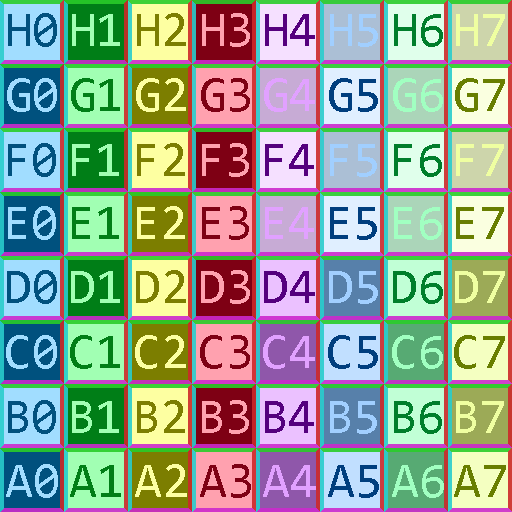
<style>
.page{position:relative;width:512px;height:512px}
.page>*{position:absolute;margin:0}
.t1{font:12px "Consolas";color:#00517e}
.t2{font:12px "Consolas";color:#a1ffb3}
.t3{font:12px "Consolas";color:#7c7e00}
.t4{font:12px "Consolas";color:#ffa1af}
.t5{font:12px "Consolas";color:#55007e}
.t6{font:12px "Consolas";color:#a1cfff}
.t7{font:12px "Consolas";color:#007e2b}
.t8{font:12px "Consolas";color:#efffa1}
.t9{font:12px "Consolas";color:#a1ddff}
.t10{font:12px "Consolas";color:#007e17}
.t11{font:12px "Consolas";color:#fdffa1}
.t12{font:12px "Consolas";color:#7e0014}
.t13{font:12px "Consolas";color:#e1a1ff}
.t14{font:12px "Consolas";color:#003e7e}
.t15{font:12px "Consolas";color:#a1ffc1}
.t16{font:12px "Consolas";color:#687e00}
</style>
<div class="page">
<p class="t1" style="left:8px;top:13px;width:49px;height:34px;text-align:center">H0</p>
<p class="t2" style="left:72px;top:14px;width:48px;height:32px;text-align:center">H1</p>
<p class="t3" style="left:137px;top:13px;width:49px;height:33px;text-align:center">H2</p>
<p class="t4" style="left:202px;top:13px;width:48px;height:34px;text-align:center">H3</p>
<p class="t5" style="left:265px;top:14px;width:50px;height:32px;text-align:center">H4</p>
<p class="t6" style="left:330px;top:14px;width:48px;height:33px;text-align:center">H5</p>
<p class="t7" style="left:394px;top:14px;width:49px;height:33px;text-align:center">H6</p>
<p class="t8" style="left:456px;top:14px;width:49px;height:32px;text-align:center">H7</p>
<p class="t9" style="left:7px;top:78px;width:50px;height:34px;text-align:center">G0</p>
<p class="t10" style="left:71px;top:78px;width:49px;height:34px;text-align:center">G1</p>
<p class="t11" style="left:136px;top:78px;width:50px;height:34px;text-align:center">G2</p>
<p class="t12" style="left:201px;top:78px;width:49px;height:34px;text-align:center">G3</p>
<p class="t13" style="left:264px;top:78px;width:51px;height:34px;text-align:center">G4</p>
<p class="t14" style="left:329px;top:78px;width:49px;height:34px;text-align:center">G5</p>
<p class="t15" style="left:393px;top:78px;width:50px;height:34px;text-align:center">G6</p>
<p class="t16" style="left:455px;top:78px;width:50px;height:34px;text-align:center">G7</p>
<p class="t1" style="left:8px;top:143px;width:48px;height:34px;text-align:center">F0</p>
<p class="t2" style="left:72px;top:144px;width:47px;height:32px;text-align:center">F1</p>
<p class="t3" style="left:137px;top:143px;width:48px;height:33px;text-align:center">F2</p>
<p class="t4" style="left:202px;top:143px;width:47px;height:34px;text-align:center">F3</p>
<p class="t5" style="left:265px;top:144px;width:49px;height:32px;text-align:center">F4</p>
<p class="t6" style="left:330px;top:144px;width:47px;height:33px;text-align:center">F5</p>
<p class="t7" style="left:394px;top:144px;width:48px;height:33px;text-align:center">F6</p>
<p class="t8" style="left:456px;top:144px;width:48px;height:32px;text-align:center">F7</p>
<p class="t9" style="left:8px;top:206px;width:48px;height:34px;text-align:center">E0</p>
<p class="t10" style="left:72px;top:207px;width:47px;height:32px;text-align:center">E1</p>
<p class="t11" style="left:137px;top:206px;width:48px;height:33px;text-align:center">E2</p>
<p class="t12" style="left:202px;top:206px;width:47px;height:34px;text-align:center">E3</p>
<p class="t13" style="left:265px;top:207px;width:49px;height:32px;text-align:center">E4</p>
<p class="t14" style="left:330px;top:207px;width:47px;height:33px;text-align:center">E5</p>
<p class="t15" style="left:394px;top:207px;width:48px;height:33px;text-align:center">E6</p>
<p class="t16" style="left:456px;top:207px;width:48px;height:32px;text-align:center">E7</p>
<p class="t1" style="left:7px;top:270px;width:50px;height:34px;text-align:center">D0</p>
<p class="t3" style="left:136px;top:270px;width:50px;height:33px;text-align:center">D2</p>
<p class="t4" style="left:201px;top:270px;width:49px;height:34px;text-align:center">D3</p>
<p class="t2" style="left:71px;top:271px;width:49px;height:32px;text-align:center">D1</p>
<p class="t5" style="left:264px;top:271px;width:51px;height:32px;text-align:center">D4</p>
<p class="t6" style="left:329px;top:271px;width:49px;height:33px;text-align:center">D5</p>
<p class="t7" style="left:393px;top:271px;width:50px;height:33px;text-align:center">D6</p>
<p class="t8" style="left:455px;top:271px;width:50px;height:32px;text-align:center">D7</p>
<p class="t9" style="left:6px;top:335px;width:51px;height:34px;text-align:center">C0</p>
<p class="t10" style="left:70px;top:335px;width:50px;height:34px;text-align:center">C1</p>
<p class="t11" style="left:135px;top:335px;width:51px;height:34px;text-align:center">C2</p>
<p class="t12" style="left:200px;top:335px;width:50px;height:34px;text-align:center">C3</p>
<p class="t13" style="left:263px;top:335px;width:52px;height:34px;text-align:center">C4</p>
<p class="t14" style="left:328px;top:335px;width:50px;height:34px;text-align:center">C5</p>
<p class="t15" style="left:392px;top:335px;width:51px;height:34px;text-align:center">C6</p>
<p class="t16" style="left:454px;top:335px;width:51px;height:34px;text-align:center">C7</p>
<p class="t1" style="left:8px;top:400px;width:48px;height:34px;text-align:center">B0</p>
<p class="t2" style="left:72px;top:401px;width:47px;height:32px;text-align:center">B1</p>
<p class="t3" style="left:137px;top:400px;width:48px;height:33px;text-align:center">B2</p>
<p class="t4" style="left:202px;top:400px;width:47px;height:34px;text-align:center">B3</p>
<p class="t5" style="left:265px;top:401px;width:49px;height:32px;text-align:center">B4</p>
<p class="t6" style="left:330px;top:401px;width:47px;height:33px;text-align:center">B5</p>
<p class="t7" style="left:394px;top:401px;width:48px;height:33px;text-align:center">B6</p>
<p class="t8" style="left:456px;top:401px;width:48px;height:32px;text-align:center">B7</p>
<p class="t9" style="left:6px;top:464px;width:52px;height:34px;text-align:center">A0</p>
<p class="t10" style="left:70px;top:465px;width:51px;height:32px;text-align:center">A1</p>
<p class="t11" style="left:135px;top:464px;width:52px;height:33px;text-align:center">A2</p>
<p class="t12" style="left:200px;top:464px;width:51px;height:34px;text-align:center">A3</p>
<p class="t13" style="left:263px;top:465px;width:53px;height:32px;text-align:center">A4</p>
<p class="t14" style="left:328px;top:465px;width:51px;height:33px;text-align:center">A5</p>
<p class="t15" style="left:392px;top:465px;width:52px;height:33px;text-align:center">A6</p>
<p class="t16" style="left:454px;top:465px;width:52px;height:32px;text-align:center">A7</p>
</div>
